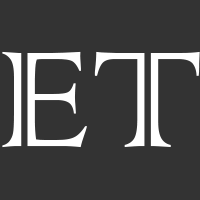
<style>
.page{position:relative;width:200px;height:200px;background:#333333}
.page>*{position:absolute;margin:0}
.t1{font:179.7px "ColonnaMT";color:#ffffff}
</style>
<div class="page">
<p class="t1" style="left:2px;top:51px;width:198px;height:97px">ET</p>
</div>
